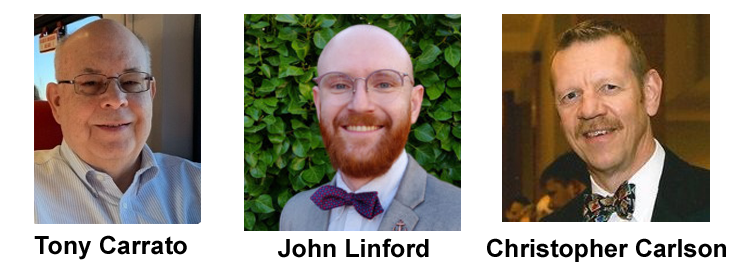
<style>
.page{position:relative;width:750px;height:270px;background:#ffffff}
.page>*{position:absolute;margin:0}
.t1{font:25px "Arial-BoldMT";color:#000000}
</style>
<div class="page">
<p class="t1" style="left:34px;top:235px;width:153px;height:25px">Tony Carrato</p>
<p class="t1" style="left:278px;top:238px;width:151px;height:20px">John Linford</p>
<p class="t1" style="left:487px;top:238px;width:239px;height:24px">Christopher Carlson</p>
</div>
